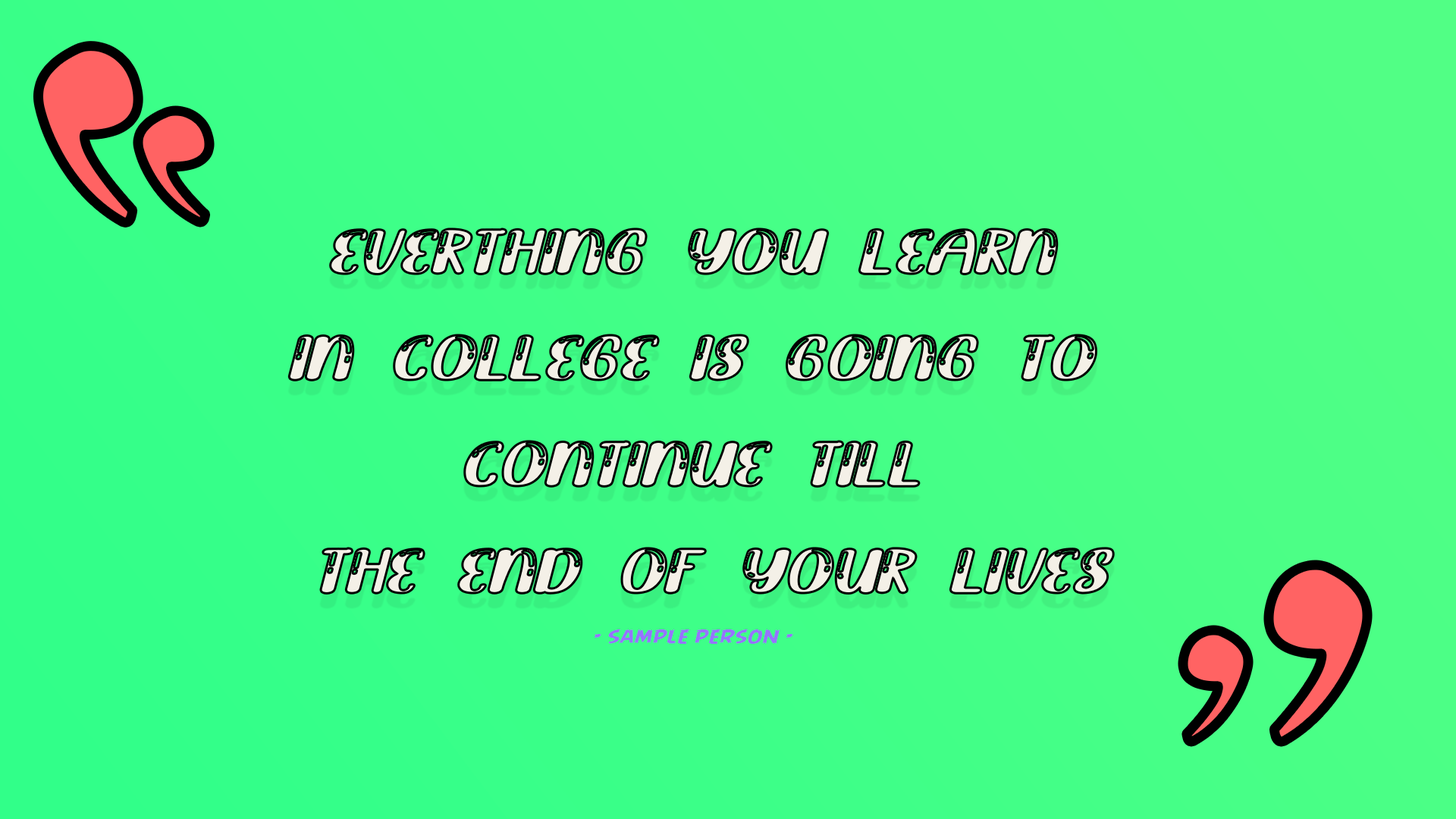
<style>
.page{position:relative;width:1456px;height:819px}
.page>*{position:absolute;margin:0}
.t1{font:51.2px/106.5px "BrighlyCrush-Shine";color:#f4f0e7;font-style:italic;scale:1.49 1}
.t2{font:21.3px "AngryBirds-Regular";color:#9773ff;font-style:italic;scale:1.36 1}
</style>
<div class="page">
<p class="t1" style="left:289px;top:229px;width:825px;height:365px;text-align:center">everthing you learn <br>in college is going to <br>continue till <br>the end of your lives</p>
<p class="t2" style="left:594px;top:629px;width:199px;height:15px">- sample person -</p>
</div>
